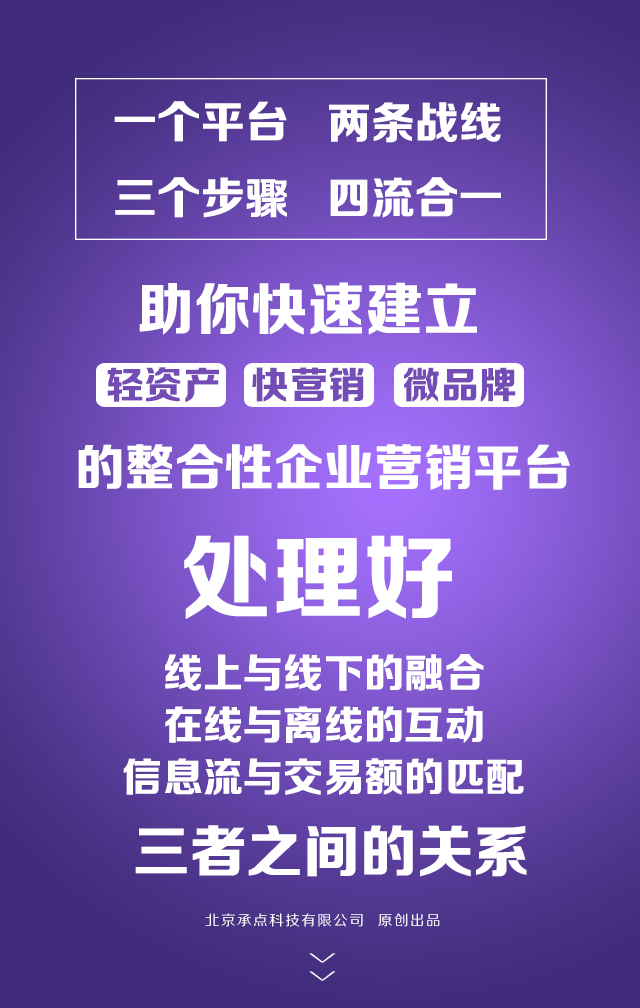
<style>
.page{position:relative;width:640px;height:1008px}
.page>*{position:absolute;margin:0}
.t1{font:44px "FZZDHJW--GB1-0";letter-spacing:0.005em;color:#ffffff;text-transform:uppercase}
.t2{font:56.9px "FZZDHJW--GB1-0";letter-spacing:0.005em;color:#ffffff;text-transform:uppercase}
.t3{font:37.8px "FZZDHJW--GB1-0";letter-spacing:0.005em;color:#734cb6;text-transform:uppercase}
.t4{font:50.2px "FZZDHJW--GB1-0";letter-spacing:0.005em;color:#ffffff;text-transform:uppercase}
.t5{font:92.9px "FZZDHJW--GB1-0";letter-spacing:0.005em;color:#ffffff;text-transform:uppercase}
.t6{font:40.6px "FZZDHJW--GB1-0";letter-spacing:0.005em;color:#ffffff;text-transform:uppercase}
.t7{font:14.2px "FZZHJW--GB1-0";letter-spacing:0.1em;color:#ffffff;text-transform:uppercase}
.t8{font:36.8px "FZZXHJW--GB1-0";letter-spacing:0.5em;color:#ffffff;text-transform:uppercase;scale:0.44 1}
</style>
<div class="page">
<p class="t1" style="left:114px;top:101px;width:173px;height:41px">一个平台</p>
<p class="t1" style="left:329px;top:102px;width:172px;height:41px">两条战线</p>
<p class="t1" style="left:115px;top:177px;width:172px;height:41px">三个步骤</p>
<p class="t1" style="left:330px;top:177px;width:171px;height:41px">四流合一</p>
<p class="t2" style="left:139px;top:282px;width:338px;height:53px">助你快速建立</p>
<p class="t3" style="left:107px;top:367px;width:112px;height:35px">轻资产</p>
<p class="t3" style="left:252px;top:367px;width:112px;height:35px">快营销</p>
<p class="t3" style="left:404px;top:367px;width:112px;height:35px">微品牌</p>
<p class="t4" style="left:78px;top:444px;width:492px;height:46px">的整合性企业营销平台</p>
<p class="t5" style="left:184px;top:535px;width:268px;height:84px">处理好</p>
<p class="t6" style="left:165px;top:654px;width:319px;height:37px">线上与线下的融合</p>
<p class="t6" style="left:165px;top:706px;width:318px;height:37px">在线与离线的互动</p>
<p class="t6" style="left:123px;top:758px;width:401px;height:37px">信息流与交易额的匹配</p>
<p class="t2" style="left:135px;top:825px;width:392px;height:52px">三者之间的关系</p>
<p class="t7" style="left:205px;top:913px;width:235px;height:14px">北京承点科技有限公司  原创出品</p>
<p class="t8" style="left:309px;top:953px;width:27px;height:28px;rotate:90deg">&gt;&gt;</p>
</div>
